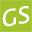
<style>
.page{position:relative;width:32px;height:32px;background:#a1c22d}
.page>*{position:absolute;margin:0}
.t1{font:22px "LucidaSans-Italic";color:#ffffff;font-weight:bold}
</style>
<div class="page">
<p class="t1" style="left:2px;top:6px;width:28px;height:21px;rotate:-12deg">GS</p>
</div>
